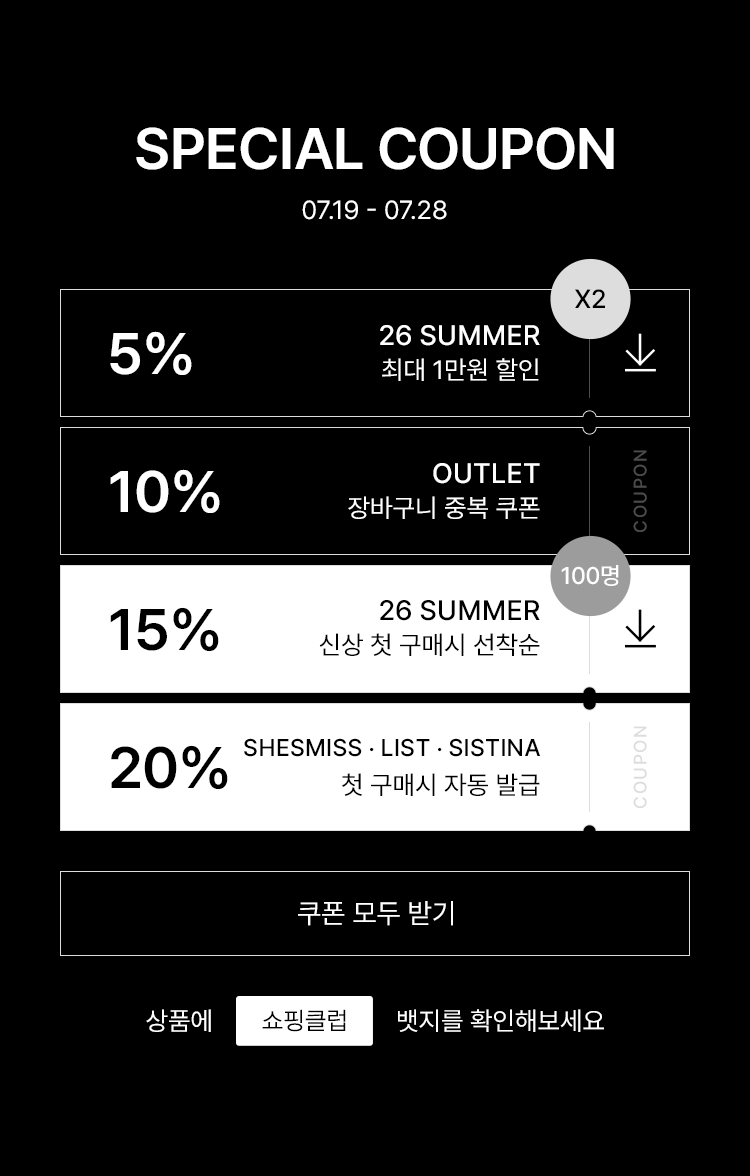
<style>
.page{position:relative;width:750px;height:1176px;background:#000000}
.page>*{position:absolute;margin:0}
.t1{font:58px "Pretendard-SemiBold";letter-spacing:-0.01em;color:#ffffff;text-transform:uppercase}
.t2{font:58px "Pretendard-SemiBold";letter-spacing:-0.02em;color:#ffffff;text-transform:uppercase}
.t3{font:26px "Pretendard-Regular";color:#ffffff;text-transform:uppercase}
.t4{font:26px "Pretendard-Medium";color:#000000;text-transform:uppercase}
.t5{font:28px/36px "Pretendard-Medium";color:#ffffff;text-transform:uppercase}
.t6{font:26px/36px "Pretendard-Regular";color:#ffffff;text-transform:uppercase}
.t7{font:18px "Pretendard-Medium";letter-spacing:0.07em;color:#4b4b4b;text-transform:uppercase}
.t8{font:24px "Pretendard-Medium";letter-spacing:-0.01em;color:#ffffff;text-transform:uppercase}
.t9{font:26px/36px "Pretendard-Regular";color:#000000;text-transform:uppercase}
.t10{font:28px/36px "Pretendard-Medium";color:#000000;text-transform:uppercase}
.t11{font:58px "Pretendard-SemiBold";letter-spacing:-0.01em;color:#000000;text-transform:uppercase}
.t12{font:18px "Pretendard-Medium";letter-spacing:0.07em;color:#dddddd;text-transform:uppercase}
.t13{font:24px/36px "Pretendard-Medium";color:#000000;text-transform:uppercase}
.t14{font:28px "Pretendard-Regular";color:#ffffff;text-transform:uppercase}
.t15{font:26px "Pretendard-Regular";color:#ffffff}
.t16{font:24.9px "Pretendard-Light";color:#000000}
</style>
<div class="page">
<p class="t1" style="left:136px;top:127px;width:478px;height:43px">SPECIAL<span class="t2"> COUPON</span></p>
<p class="t1" style="left:136px;top:127px;width:478px;height:43px">SPECIAL<span class="t2"> COUPON</span></p>
<p class="t3" style="left:302px;top:200px;width:145px;height:20px">07.19 - 07.28</p>
<p class="t3" style="left:302px;top:200px;width:145px;height:20px">07.19 - 07.28</p>
<p class="t4" style="left:575px;top:289px;width:30px;height:19px">x2</p>
<p class="t4" style="left:575px;top:289px;width:30px;height:19px">x2</p>
<p class="t5" style="left:380px;top:325px;width:160px;height:56px;text-align:right">26 summer<br><span class="t6"> 최대 1만원 할인</span></p>
<p class="t5" style="left:380px;top:325px;width:160px;height:56px;text-align:right">26 summer<br><span class="t6"> 최대 1만원 할인</span></p>
<p class="t1" style="left:110px;top:331px;width:82px;height:44px">5%</p>
<p class="t1" style="left:110px;top:331px;width:82px;height:44px">5%</p>
<p class="t7" style="left:633px;top:450px;width:14px;height:82px;rotate:-90deg">coupon</p>
<p class="t7" style="left:633px;top:450px;width:14px;height:82px;rotate:-90deg">coupon</p>
<p class="t1" style="left:110px;top:469px;width:110px;height:44px">10%</p>
<p class="t1" style="left:110px;top:469px;width:110px;height:44px">10%</p>
<p class="t6" style="left:348px;top:463px;width:192px;height:56px;text-align:right"><span class="t5">outlet<br></span>장바구니 중복 쿠폰</p>
<p class="t6" style="left:348px;top:463px;width:192px;height:56px;text-align:right"><span class="t5">outlet<br></span>장바구니 중복 쿠폰</p>
<p class="t8" style="left:561px;top:565px;width:58px;height:21px">100명</p>
<p class="t8" style="left:561px;top:565px;width:58px;height:21px">100명</p>
<p class="t9" style="left:319px;top:601px;width:221px;height:56px;text-align:right"><span class="t10">26 summer<br></span>신상 첫 구매시 선착순</p>
<p class="t9" style="left:319px;top:600px;width:221px;height:56px;text-align:right"><span class="t10">26 summer<br></span>신상 첫 구매시 선착순</p>
<p class="t11" style="left:110px;top:607px;width:109px;height:44px">15%</p>
<p class="t11" style="left:110px;top:607px;width:109px;height:44px">15%</p>
<p class="t12" style="left:633px;top:726px;width:14px;height:82px;rotate:-90deg">coupon</p>
<p class="t12" style="left:633px;top:726px;width:14px;height:82px;rotate:-90deg">coupon</p>
<p class="t11" style="left:111px;top:745px;width:117px;height:44px">20%</p>
<p class="t11" style="left:111px;top:745px;width:117px;height:44px">20%</p>
<p class="t13" style="left:244px;top:738px;width:297px;height:58px;text-align:right">shesmiss . list . sistina<br><span class="t9">첫 구매시 자동 발급</span></p>
<p class="t13" style="left:244px;top:738px;width:297px;height:58px;text-align:right">shesmiss . list . sistina<br><span class="t9">첫 구매시 자동 발급</span></p>
<p class="t14" style="left:298px;top:901px;width:155px;height:25px">쿠폰 모두 받기</p>
<p class="t14" style="left:298px;top:901px;width:155px;height:25px">쿠폰 모두 받기</p>
<p class="t15" style="left:146px;top:1009px;width:458px;height:23px">상품에                            뱃지를 확인해보세요</p>
<p class="t15" style="left:146px;top:1009px;width:458px;height:23px">상품에                            뱃지를 확인해보세요</p>
<p class="t16" style="left:262px;top:1009px;width:84px;height:23px">쇼핑클럽</p>
<p class="t16" style="left:262px;top:1009px;width:84px;height:23px">쇼핑클럽</p>
</div>
